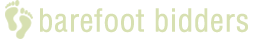
<style>
.page{position:relative;width:256px;height:40px;background:#ffffff}
.page>*{position:absolute;margin:0}
.t1{font:30.8px "HelveticaLT-Condensed";color:#d7e0b1;font-weight:bold}
</style>
<div class="page">
<p class="t1" style="left:40px;top:8px;width:208px;height:25px">barefoot bidders</p>
</div>
